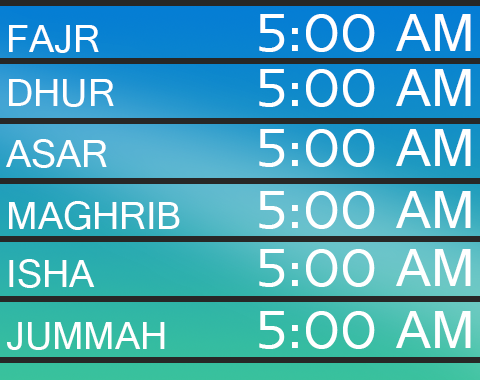
<style>
.page{position:relative;width:480px;height:380px}
.page>*{position:absolute;margin:0}
.t1{font:58.3px "Raavi";color:#ffffff}
.t2{font:41.7px "Raavi";color:#ffffff}
</style>
<div class="page">
<p class="t1" style="left:259px;top:14px;width:212px;height:38px">5:00 AM</p>
<p class="t2" style="left:9px;top:25px;width:90px;height:28px">FAJR</p>
<p class="t1" style="left:259px;top:69px;width:212px;height:38px">5:00 AM</p>
<p class="t2" style="left:9px;top:79px;width:105px;height:28px">DHUR</p>
<p class="t1" style="left:259px;top:129px;width:212px;height:38px">5:00 AM</p>
<p class="t2" style="left:6px;top:139px;width:101px;height:29px">ASAR</p>
<p class="t1" style="left:259px;top:191px;width:212px;height:38px">5:00 AM</p>
<p class="t2" style="left:9px;top:201px;width:171px;height:29px">MAGHRIB</p>
<p class="t1" style="left:259px;top:249px;width:212px;height:38px">5:00 AM</p>
<p class="t2" style="left:9px;top:259px;width:86px;height:29px">ISHA</p>
<p class="t1" style="left:259px;top:311px;width:212px;height:38px">5:00 AM</p>
<p class="t2" style="left:7px;top:322px;width:158px;height:28px">JUMMAH</p>
</div>
